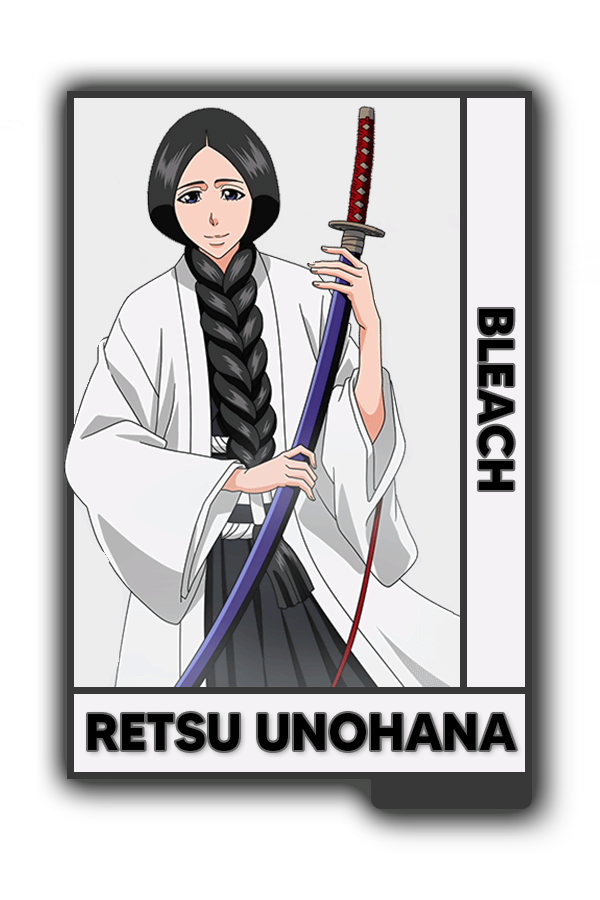
<style>
.page{position:relative;width:600px;height:900px;background:#ffffff}
.page>*{position:absolute;margin:0}
.t1{font:48.8px "MADETOMMY-Bold";color:#000000}
.t2{font:51.3px "MADETOMMY-Bold";color:#000000}
</style>
<div class="page">
<p class="t1" style="left:478px;top:309px;width:36px;height:181px;rotate:90deg">BLEACH</p>
<p class="t2" style="left:88px;top:713px;width:428px;height:38px">RETSU UNOHANA</p>
</div>
